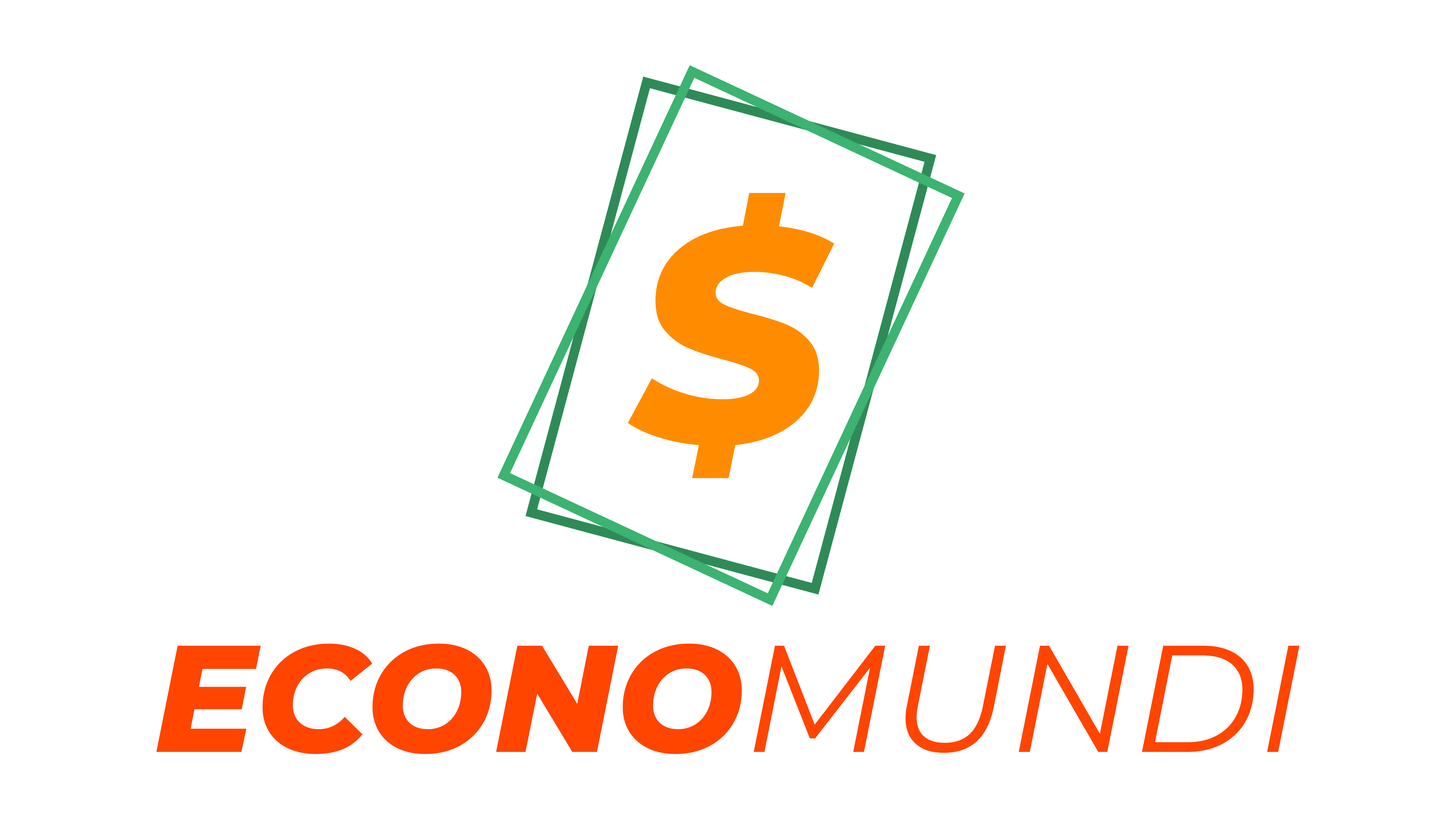
<style>
.page{position:relative;width:1456px;height:819px;background:#ffffff}
.page>*{position:absolute;margin:0}
.t1{font:151.7px "Montserrat-ExtraBoldItalic";color:#ff4500}
.t2{font:151.7px "Montserrat-Italic";color:#ff4500}
</style>
<div class="page">
<p class="t1" style="left:156px;top:643px;width:1143px;height:111px">ECONO<span class="t2">MUNDI</span></p>
</div>
